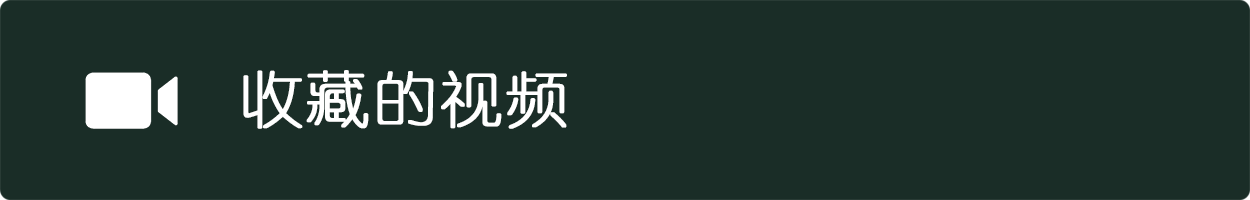
<style>
.page{position:relative;width:1250px;height:200px;background:#1a2d27}
.page>*{position:absolute;margin:0}
.t1{font:60.8px "YouYuan";letter-spacing:0.01em;color:#ffffff;font-weight:bold;scale:1.05 1}
</style>
<div class="page">
<p class="t1" style="left:243px;top:70px;width:324px;height:59px">收藏的视频</p>
</div>
